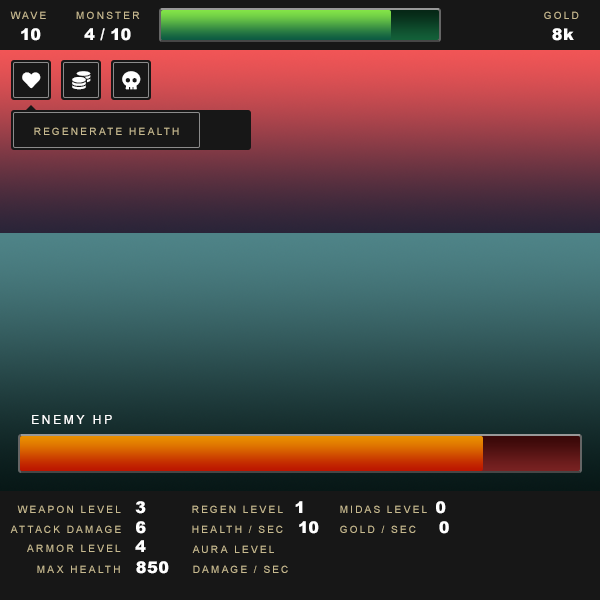
<style>
.page{position:relative;width:600px;height:600px;background:#171717}
.page>*{position:absolute;margin:0}
.t1{font:10px "ArialMT";letter-spacing:0.2em;color:#c7b990}
.t2{font:16px "Arial-Black";color:#ffffff}
.t3{font:10px "ArialMT";letter-spacing:0.2em;color:#c7ba90}
.t4{font:12px "ArialMT";letter-spacing:0.2em;color:#ffffff}
</style>
<div class="page">
<p class="t1" style="left:10px;top:11px;width:36px;height:8px">WAVE</p>
<p class="t1" style="left:76px;top:11px;width:64px;height:8px">MONSTER</p>
<p class="t1" style="left:544px;top:11px;width:35px;height:8px">GOLD</p>
<p class="t2" style="left:21px;top:28px;width:20px;height:13px">10</p>
<p class="t2" style="left:84px;top:28px;width:47px;height:13px">4 / 10</p>
<p class="t2" style="left:552px;top:28px;width:22px;height:13px">8k</p>
<p class="t3" style="left:34px;top:127px;width:145px;height:8px">REGENERATE HEALTH</p>
<p class="t4" style="left:32px;top:415px;width:80px;height:9px">ENEMY HP</p>
<p class="t3" style="left:17px;top:505px;width:104px;height:8px">WEAPON LEVEL</p>
<p class="t2" style="left:135px;top:501px;width:11px;height:13px">3</p>
<p class="t3" style="left:192px;top:505px;width:91px;height:8px">REGEN LEVEL</p>
<p class="t2" style="left:295px;top:501px;width:8px;height:12px">1</p>
<p class="t3" style="left:340px;top:505px;width:87px;height:8px">MIDAS LEVEL</p>
<p class="t2" style="left:436px;top:501px;width:10px;height:13px">0</p>
<p class="t2" style="left:136px;top:521px;width:10px;height:13px">6</p>
<p class="t2" style="left:299px;top:521px;width:20px;height:13px">10</p>
<p class="t2" style="left:439px;top:521px;width:10px;height:13px">0</p>
<p class="t3" style="left:10px;top:525px;width:111px;height:8px">ATTACK DAMAGE</p>
<p class="t3" style="left:192px;top:525px;width:91px;height:8px">HEALTH / SEC</p>
<p class="t3" style="left:340px;top:525px;width:76px;height:8px">GOLD / SEC</p>
<p class="t3" style="left:27px;top:544px;width:94px;height:8px">ARMOR LEVEL</p>
<p class="t2" style="left:135px;top:540px;width:11px;height:12px">4</p>
<p class="t3" style="left:192px;top:545px;width:82px;height:8px">AURA LEVEL</p>
<p class="t3" style="left:37px;top:565px;width:83px;height:8px">MAX HEALTH</p>
<p class="t2" style="left:136px;top:561px;width:33px;height:13px">850</p>
<p class="t3" style="left:193px;top:565px;width:95px;height:8px">DAMAGE / SEC</p>
</div>
